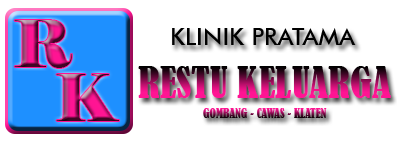
<style>
.page{position:relative;width:397px;height:142px;background:#ffffff}
.page>*{position:absolute;margin:0}
.t1{font:65px "Elephant-Regular"}
.t2{font:24px "FuturaBT-Medium";color:#000000}
.t3{font:40px "BernardMT-Condensed"}
.t4{font:12px "BernardMT-Condensed"}
</style>
<div class="page">
<p class="t1" style="left:14px;top:20px;width:58px;height:48px">R</p>
<p class="t2" style="left:172px;top:28px;width:184px;height:17px">KLINIK PRATAMA</p>
<p class="t1" style="left:56px;top:74px;width:63px;height:47px">K</p>
<p class="t3" style="left:138px;top:66px;width:253px;height:32px">RESTU KELUARGA</p>
<p class="t4" style="left:203px;top:108px;width:124px;height:10px">GOMBANG - CAWAS - KLATEN</p>
</div>
